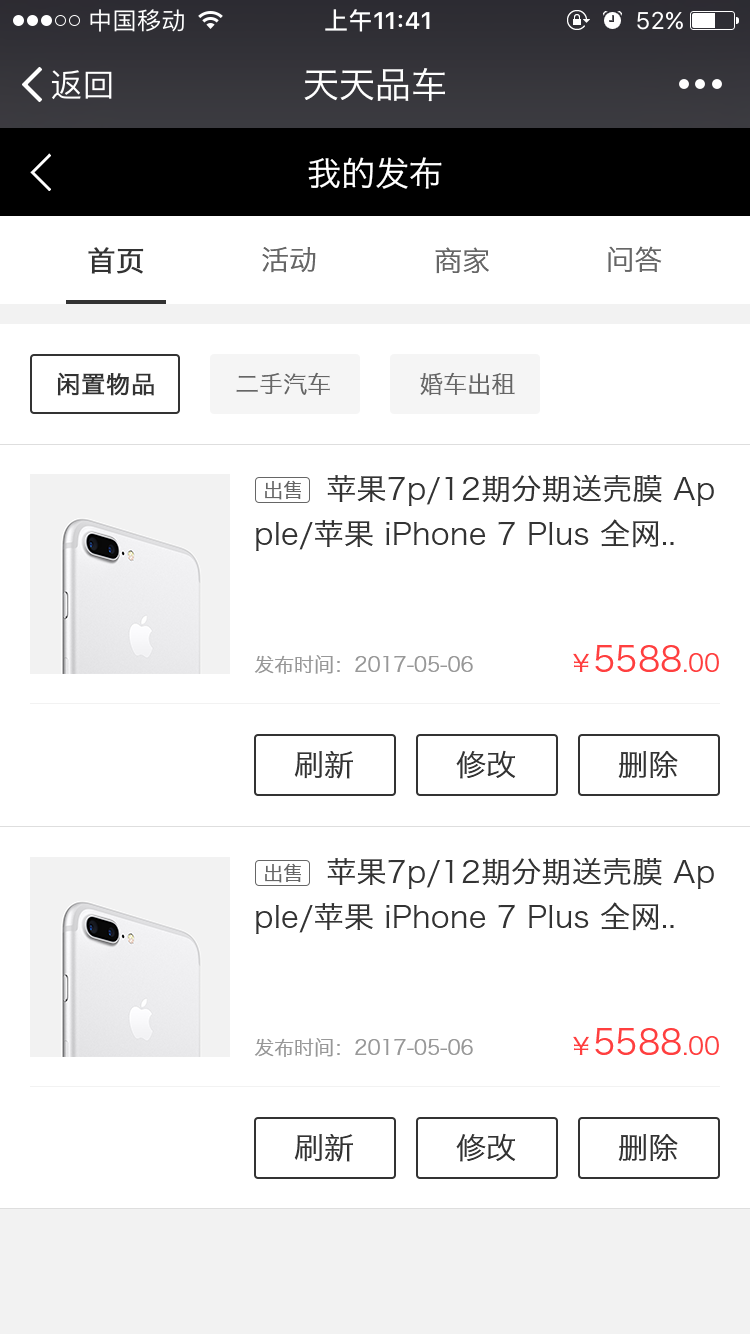
<style>
.page{position:relative;width:750px;height:1334px;background:#ffffff}
.page>*{position:absolute;margin:0}
.t1{font:36px "HiraginoSansGB-W3";color:#ffffff}
.t2{font:34px "HiraginoSansGB-W3";color:#ffffff}
.t3{font:28px "HiraginoSansGB-W3";color:#666666}
.t4{font:28px "HiraginoSansGB-W3";color:#333333;font-weight:bold}
.t5{font:24px "HiraginoSansGB-W3";color:#333333;font-weight:bold}
.t6{font:24px "HiraginoSansGB-W3";color:#666666}
.t7{font:30px/45px "HiraginoSansGB-W3";letter-spacing:0.01em;color:#333333}
.t8{font:20px "HiraginoSansGB-W3";color:#666666}
.t9{font:34px "HiraginoSansGB-W3";color:#ff3f3f}
.t10{font:24px "HiraginoSansGB-W3";color:#ff3f3f}
.t11{font:20px "HiraginoSansGB-W3";color:#989898}
.t12{font:30px "HiraginoSansGB-W3";color:#333333}
</style>
<div class="page">
<p class="t1" style="left:304px;top:68px;width:141px;height:34px">天天品车</p>
<p class="t2" style="left:308px;top:157px;width:134px;height:32px">我的发布</p>
<p class="t3" style="left:262px;top:246px;width:54px;height:27px">活动</p>
<p class="t3" style="left:608px;top:246px;width:54px;height:26px">问答</p>
<p class="t4" style="left:88px;top:247px;width:56px;height:27px">首页</p>
<p class="t3" style="left:435px;top:247px;width:54px;height:27px">商家</p>
<p class="t5" style="left:57px;top:372px;width:97px;height:24px">闲置物品</p>
<p class="t6" style="left:236px;top:372px;width:94px;height:23px">二手汽车</p>
<p class="t6" style="left:420px;top:372px;width:95px;height:24px">婚车出租</p>
<p class="t7" style="left:256px;top:474px;width:458px;height:77px">苹果7p/12期分期送壳膜 Ap<br>ple/苹果 iPhone 7 Plus 全网..</p>
<p class="t8" style="left:265px;top:480px;width:36px;height:20px">出售</p>
<p class="t9" style="left:573px;top:644px;width:146px;height:28px"><span class="t10">￥</span>5588<span class="t10">.00</span></p>
<p class="t11" style="left:254px;top:655px;width:219px;height:19px">发布时间：2017-05-06</p>
<p class="t12" style="left:456px;top:750px;width:60px;height:29px">修改</p>
<p class="t12" style="left:618px;top:750px;width:60px;height:28px">删除</p>
<p class="t12" style="left:294px;top:751px;width:59px;height:28px">刷新</p>
<p class="t7" style="left:256px;top:857px;width:458px;height:77px">苹果7p/12期分期送壳膜 Ap<br>ple/苹果 iPhone 7 Plus 全网..</p>
<p class="t8" style="left:265px;top:863px;width:36px;height:20px">出售</p>
<p class="t11" style="left:254px;top:1038px;width:219px;height:19px">发布时间：2017-05-06</p>
<p class="t9" style="left:573px;top:1027px;width:146px;height:28px"><span class="t10">￥</span>5588<span class="t10">.00</span></p>
<p class="t12" style="left:294px;top:1134px;width:59px;height:28px">刷新</p>
<p class="t12" style="left:456px;top:1133px;width:60px;height:29px">修改</p>
<p class="t12" style="left:618px;top:1133px;width:60px;height:28px">删除</p>
</div>
